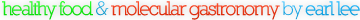
<style>
.page{position:relative;width:360px;height:20px}
.page>*{position:absolute;margin:0}
.t1{font:20px "Nilland-Bold";letter-spacing:-0.075em}
.t2{font:20px "Nilland";letter-spacing:-0.075em}
</style>
<div class="page">
<p class="t1" style="left:2px;top:1px;width:358px;height:19px">healthy food <span class="t2">&amp; </span>molecular gastronomy <span class="t2">by</span> earl lee</p>
</div>
